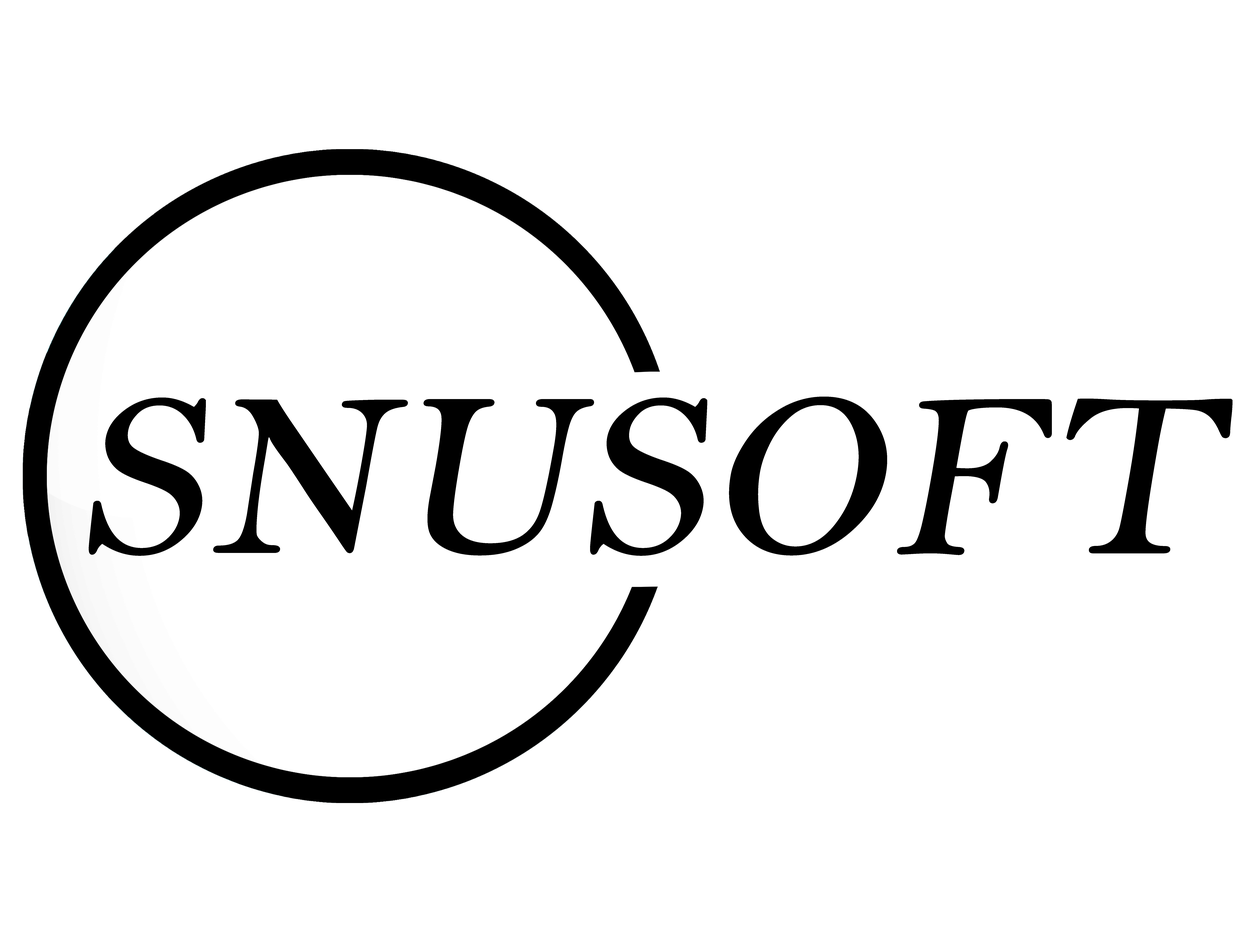
<style>
.page{position:relative;width:1253px;height:952px;background:#ffffff}
.page>*{position:absolute;margin:0}
.t1{font:236.6px "BellMT";color:#000000;font-weight:bold;font-style:italic}
</style>
<div class="page">
<p class="t1" style="left:89px;top:397px;width:1143px;height:159px">SNUSOFT</p>
</div>
